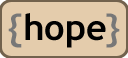
<style>
.page{position:relative;width:128px;height:58px;background:#e4ccac}
.page>*{position:absolute;margin:0}
.t1{font:36px "TrebuchetMS-Bold";letter-spacing:0.025em;color:#000000}
.t2{font:36px "TrebuchetMS-Bold";letter-spacing:0.025em;color:#777777}
</style>
<div class="page">
<p class="t1" style="left:8px;top:13px;width:112px;height:35px"><span class="t2">{</span>hope<span class="t2">}</span></p>
</div>
